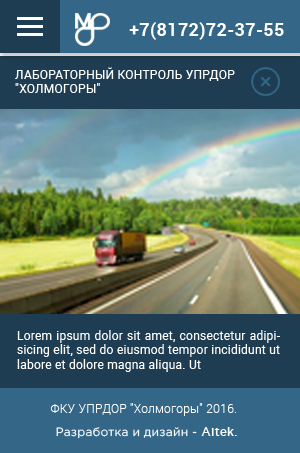
<style>
.page{position:relative;width:300px;height:453px;background:#1f3d52}
.page>*{position:absolute;margin:0}
.t1{font:18px "Roboto-Bold";letter-spacing:0.02em;color:#ffffff}
.t2{font:12px "Roboto-Regular";letter-spacing:0.02em;color:#ffffff;text-transform:uppercase}
.t3{font:12px "Roboto-Regular";letter-spacing:0.02em;color:#ffffff}
.t4{font:12px "Roboto-Light";letter-spacing:0.02em;color:#ffffff}
.t5{font:12px "Roboto-Light";letter-spacing:0.02em;color:#fbfdff}
.t6{font:12px "GothamPro";letter-spacing:0.02em;color:#fbfdff}
.t7{font:12px "GothamPro-Medium";letter-spacing:0.02em;color:#fbfdff}
</style>
<div class="page">
<p class="t1" style="left:129px;top:22px;width:155px;height:18px">+7(8172)72-37-55</p>
<p class="t2" style="left:15px;top:67px;width:220px;height:26px">Лабораторный контроль Упрдор <br>"Холмогоры"</p>
<p class="t3" style="left:17px;top:330px;width:263px;height:42px;text-align:justify">Lorem ipsum dolor sit amet, consectetur adipisicing elit, sed do eiusmod tempor incididunt ut labore et dolore magna aliqua. Ut</p>
<p class="t4" style="left:50px;top:403px;width:186px;height:13px">ФКУ УПРДОР "Холмогоры"<span class="t5"> 2016.</span></p>
<p class="t6" style="left:56px;top:427px;width:181px;height:12px">Разработка и дизайн - <span class="t7">Aitek.</span></p>
</div>
